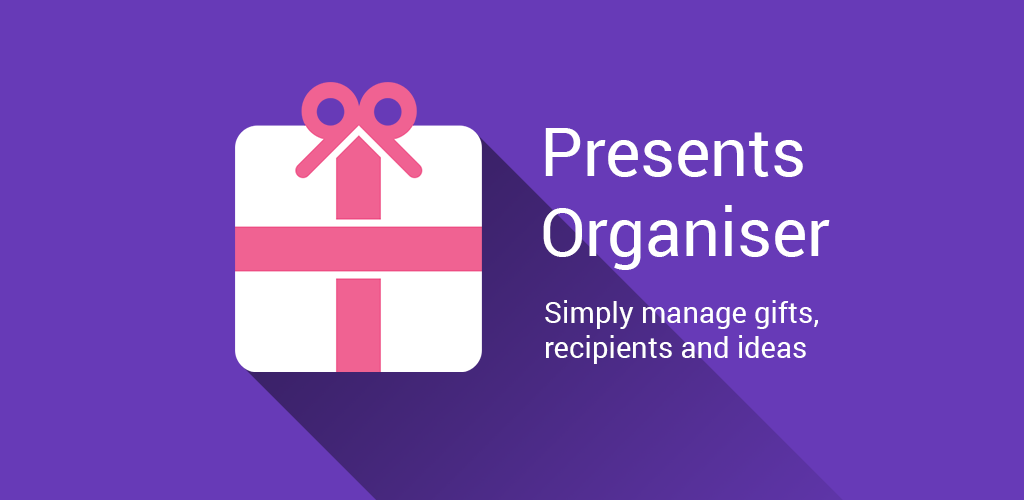
<style>
.page{position:relative;width:1024px;height:500px;background:#673ab7}
.page>*{position:absolute;margin:0}
.t1{font:66.7px "Roboto-Regular";color:#ffffff}
.t2{font:29.2px "Roboto-Regular";color:#ffffff}
</style>
<div class="page">
<p class="t1" style="left:543px;top:128px;width:287px;height:142px">Presents<br>Organiser</p>
<p class="t2" style="left:545px;top:300px;width:273px;height:64px">Simply manage gifts, <br>recipients and ideas</p>
</div>
